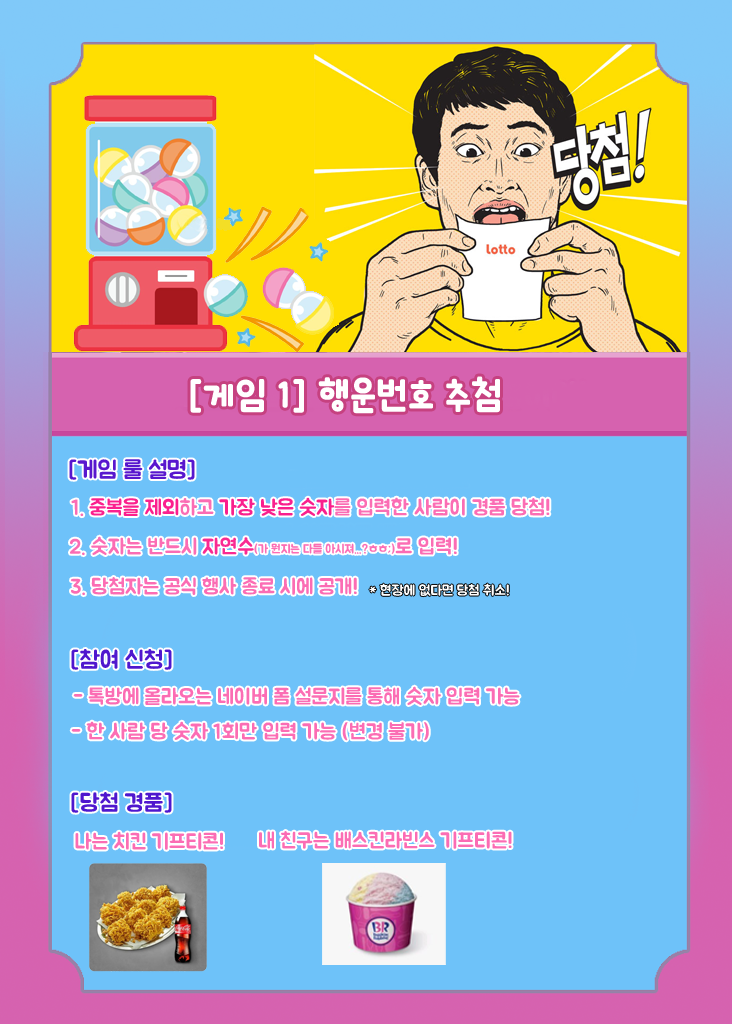
<style>
.page{position:relative;width:732px;height:1024px;background:#6ec2f9}
.page>*{position:absolute;margin:0}
.t1{font:40px "icTTHayanbunpilB";color:#ffffff}
.t2{font:24px "Pix_BMJUAOTF";color:#5817ce}
.t3{font:21px "Pix_BMJUAOTF";color:#fb6db4}
.t4{font:21px "Pix_BMJUAOTF";color:#fb208e}
.t5{font:21px "Pix_BMJUAOTF";color:#f9208d}
.t6{font:12px "Pix_BMJUAOTF";color:#fb6db4}
.t7{font:21px "Pix_BMJUAOTF";color:#f92a92}
.t8{font:14px "Pix_BMJUAOTF";color:#ffffff}
.t9{font:24px "Pix_BMJUAOTF";color:#4f17ce}
</style>
<div class="page">
<p class="t1" style="left:190px;top:376px;width:310px;height:38px">[게임 1] 행운번호 추첨</p>
<p class="t2" style="left:69px;top:459px;width:126px;height:21px">[게임 룰 설명]</p>
<p class="t3" style="left:71px;top:497px;width:479px;height:20px">1. <span class="t4">중복을 제외</span>하고 <span class="t5">가장 낮은 숫자</span>를 입력한 사람이 경품 당첨!</p>
<p class="t6" style="left:70px;top:536px;width:387px;height:20px"><span class="t3">2. 숫자는 반드시</span><span class="t7"> 자연수</span>(가 뭔지는 다들 아시져...?ㅎㅎ;)<span class="t3">로 입력!</span></p>
<p class="t3" style="left:71px;top:577px;width:286px;height:19px">3. 당첨자는 공식 행사 종료 시에 공개!</p>
<p class="t8" style="left:369px;top:583px;width:140px;height:14px">* 현장에 없다면 당첨 취소!</p>
<p class="t9" style="left:71px;top:649px;width:101px;height:21px">[참여 신청]</p>
<p class="t3" style="left:73px;top:686px;width:447px;height:19px">- 톡방에 올라오는 네이버 폼 설문지를 통해 숫자 입력 가능</p>
<p class="t3" style="left:71px;top:721px;width:358px;height:20px">- 한 사람 당 숫자 1회만 입력 가능 (변경 불가)</p>
<p class="t9" style="left:71px;top:792px;width:101px;height:21px">[당첨 경품]</p>
<p class="t3" style="left:75px;top:831px;width:148px;height:19px">나는 치킨 기프티콘!</p>
<p class="t3" style="left:259px;top:831px;width:253px;height:18px">내 친구는 배스킨라빈스 기프티콘!</p>
</div>
